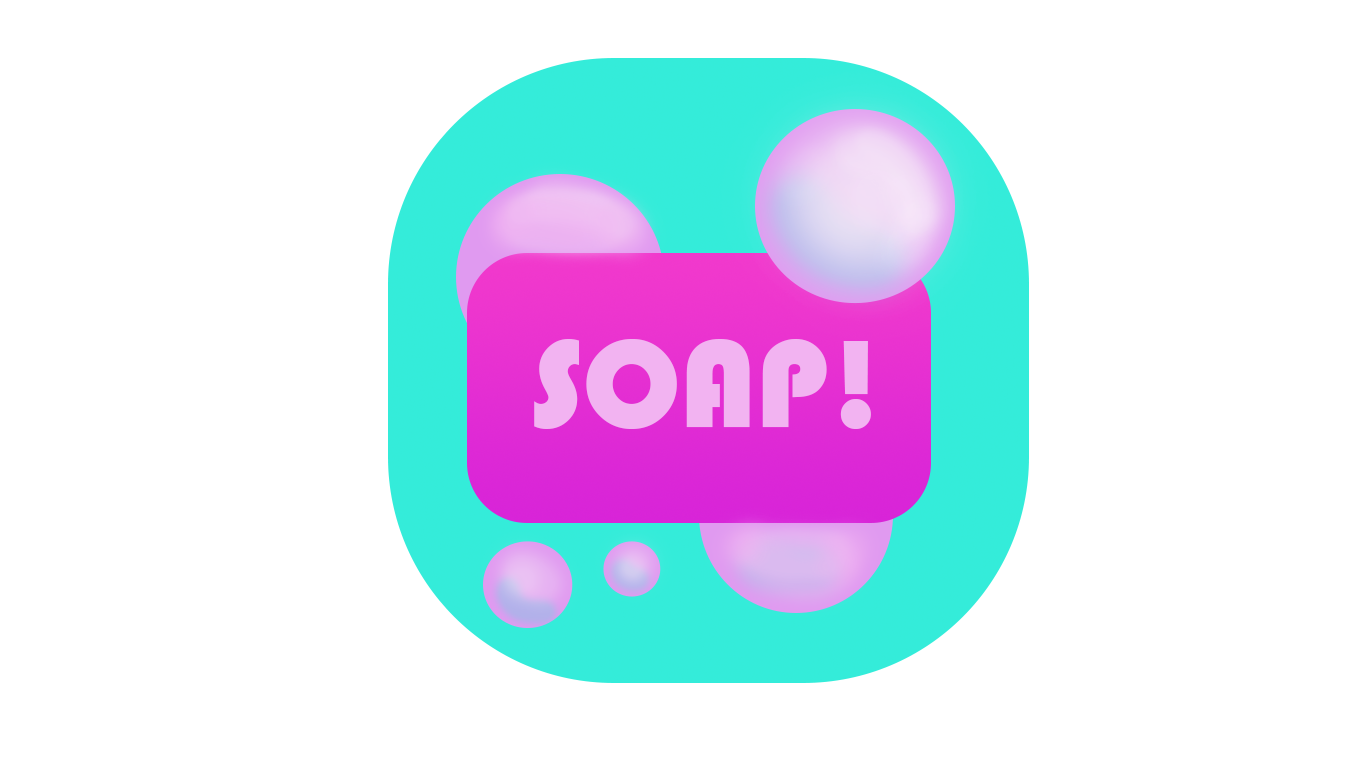
<style>
.page{position:relative;width:1366px;height:768px;background:#ffffff}
.page>*{position:absolute;margin:0}
.t1{font:128.5px "Bauhaus93";color:#f2b3f1}
</style>
<div class="page">
<p class="t1" style="left:534px;top:339px;width:337px;height:90px">SOAP!</p>
</div>
